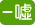
<style>
.page{position:relative;width:35px;height:25px;background:#56a205}
.page>*{position:absolute;margin:0}
.t1{font:18px "DFYuan-Bd-HK-BF";color:#ffffff}
.t2{font:24px "DFYuan-Bd-HK-BF";color:#ffffff}
</style>
<div class="page">
<p class="t1" style="left:15px;top:3px;width:17px;height:17px">噓</p>
<p class="t2" style="left:2px;top:11px;width:11px;height:2px">-</p>
</div>
